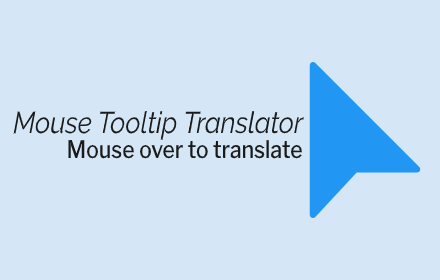
<style>
.page{position:relative;width:440px;height:280px;background:#d5e7f6}
.page>*{position:absolute;margin:0}
.t1{font:30px "Raleway-Italic";color:#1a1a1a;scale:0.88 1}
.t2{font:24px "LibreFranklin-Medium";color:#1a1a1a;scale:0.88 1}
</style>
<div class="page">
<p class="t1" style="left:13px;top:111px;width:291px;height:29px">Mouse Tooltip Translator</p>
<p class="t2" style="left:68px;top:140px;width:234px;height:19px">Mouse over to translate</p>
</div>
